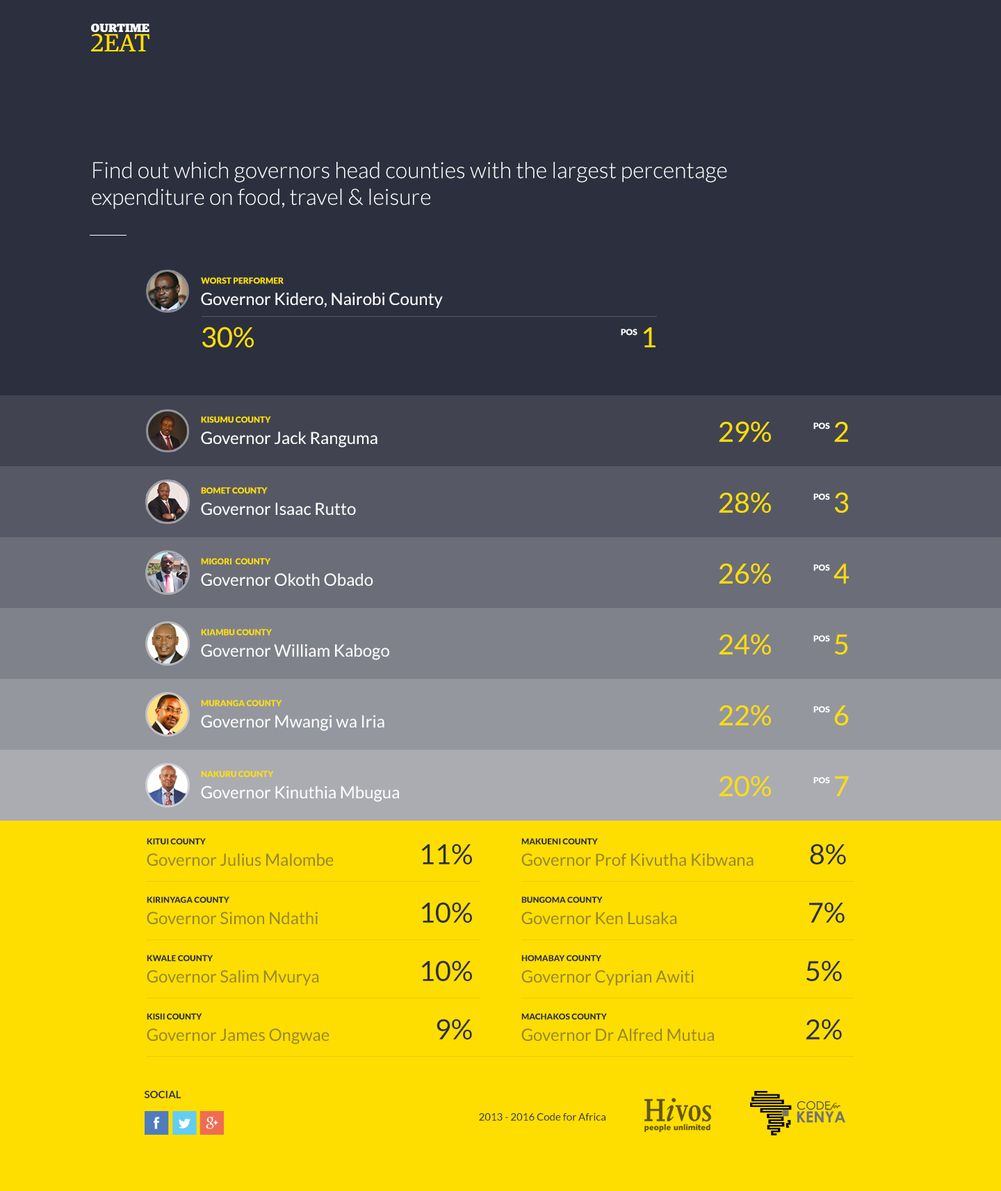
<style>
.page{position:relative;width:1001px;height:1191px;background:#2c2f3e}
.page>*{position:absolute;margin:0}
.t1{font:22.2px "Lato-Light";color:#fefefe}
.t2{font:8.3px "Lato-Black";color:#fede00}
.t3{font:16.7px "Lato-Regular";color:#fefefe}
.t4{font:27.8px "Lato-Regular";color:#fede00}
.t5{font:8.3px "Lato-Black";color:#ffffff}
.t6{font:8.3px "Lato-Black";color:#2c2f3e}
.t7{font:27.8px "Lato-Regular";color:#2c2f3e}
.t8{font:16.7px "Lato-Regular";color:#97862a}
.t9{font:10.4px "Lato-Bold";color:#2c2f3e}
.t10{font:10.4px "Lato-Regular";color:#2c2f3e}
</style>
<div class="page">
<p class="t1" style="left:92px;top:162px;width:635px;height:47px">Find out which governors head counties with the largest percentage <br>expenditure on food, travel &amp; leisure</p>
<p class="t2" style="left:201px;top:277px;width:83px;height:7px">WORST PERFORMER</p>
<p class="t3" style="left:201px;top:293px;width:242px;height:16px">Governor Kidero, Nairobi County</p>
<p class="t4" style="left:202px;top:327px;width:52px;height:21px">30%</p>
<p class="t5" style="left:621px;top:329px;width:16px;height:7px">POS</p>
<p class="t4" style="left:643px;top:327px;width:12px;height:21px">1</p>
<p class="t2" style="left:201px;top:416px;width:70px;height:7px">KISUMU COUNTY</p>
<p class="t4" style="left:719px;top:421px;width:52px;height:21px">29%</p>
<p class="t5" style="left:813px;top:423px;width:17px;height:7px">POS</p>
<p class="t4" style="left:834px;top:422px;width:14px;height:20px">2</p>
<p class="t3" style="left:201px;top:432px;width:176px;height:16px">Governor Jack Ranguma</p>
<p class="t2" style="left:201px;top:487px;width:67px;height:7px">BOMET COUNTY</p>
<p class="t4" style="left:719px;top:492px;width:52px;height:21px">28%</p>
<p class="t5" style="left:813px;top:494px;width:17px;height:6px">POS</p>
<p class="t4" style="left:835px;top:492px;width:14px;height:21px">3</p>
<p class="t3" style="left:201px;top:503px;width:155px;height:12px">Governor Isaac Rutto</p>
<p class="t2" style="left:201px;top:558px;width:70px;height:7px">MIGORI  COUNTY</p>
<p class="t4" style="left:719px;top:563px;width:52px;height:21px">26%</p>
<p class="t5" style="left:813px;top:564px;width:17px;height:7px">POS</p>
<p class="t4" style="left:833px;top:564px;width:16px;height:20px">4</p>
<p class="t3" style="left:201px;top:573px;width:172px;height:13px">Governor Okoth Obado</p>
<p class="t2" style="left:201px;top:629px;width:71px;height:7px">KIAMBU COUNTY</p>
<p class="t4" style="left:719px;top:634px;width:52px;height:21px">24%</p>
<p class="t5" style="left:813px;top:635px;width:17px;height:7px">POS</p>
<p class="t4" style="left:835px;top:635px;width:13px;height:20px">5</p>
<p class="t3" style="left:201px;top:644px;width:188px;height:16px">Governor William Kabogo</p>
<p class="t2" style="left:201px;top:700px;width:81px;height:7px">MURANGA COUNTY</p>
<p class="t4" style="left:719px;top:705px;width:52px;height:21px">22%</p>
<p class="t5" style="left:813px;top:706px;width:17px;height:7px">POS</p>
<p class="t4" style="left:835px;top:705px;width:14px;height:21px">6</p>
<p class="t3" style="left:201px;top:715px;width:183px;height:16px">Governor Mwangi wa Iria</p>
<p class="t2" style="left:201px;top:771px;width:73px;height:7px">NAKURU COUNTY</p>
<p class="t4" style="left:719px;top:776px;width:52px;height:21px">20%</p>
<p class="t5" style="left:813px;top:777px;width:17px;height:7px">POS</p>
<p class="t4" style="left:835px;top:776px;width:14px;height:21px">7</p>
<p class="t3" style="left:201px;top:786px;width:198px;height:16px">Governor Kinuthia Mbugua</p>
<p class="t6" style="left:147px;top:838px;width:59px;height:7px">KITUI COUNTY</p>
<p class="t7" style="left:421px;top:844px;width:51px;height:21px">11%</p>
<p class="t6" style="left:521px;top:838px;width:77px;height:7px">MAKUENI COUNTY</p>
<p class="t7" style="left:810px;top:844px;width:36px;height:21px">8%</p>
<p class="t8" style="left:147px;top:854px;width:187px;height:12px">Governor Julius Malombe</p>
<p class="t8" style="left:521px;top:854px;width:232px;height:12px">Governor Prof Kivutha Kibwana</p>
<p class="t6" style="left:147px;top:897px;width:82px;height:7px">KIRINYAGA COUNTY</p>
<p class="t7" style="left:421px;top:902px;width:51px;height:21px">10%</p>
<p class="t6" style="left:521px;top:897px;width:82px;height:7px">BUNGOMA COUNTY</p>
<p class="t7" style="left:809px;top:902px;width:36px;height:21px">7%</p>
<p class="t8" style="left:147px;top:912px;width:171px;height:12px">Governor Simon Ndathi</p>
<p class="t8" style="left:521px;top:912px;width:156px;height:12px">Governor Ken Lusaka</p>
<p class="t6" style="left:147px;top:955px;width:66px;height:7px">KWALE COUNTY</p>
<p class="t7" style="left:421px;top:961px;width:51px;height:20px">10%</p>
<p class="t6" style="left:521px;top:955px;width:81px;height:7px">HOMABAY COUNTY</p>
<p class="t7" style="left:806px;top:961px;width:36px;height:20px">5%</p>
<p class="t8" style="left:147px;top:970px;width:172px;height:16px">Governor Salim Mvurya</p>
<p class="t8" style="left:521px;top:970px;width:173px;height:16px">Governor Cyprian Awiti</p>
<p class="t6" style="left:147px;top:1013px;width:55px;height:7px">KISII COUNTY</p>
<p class="t6" style="left:521px;top:1013px;width:86px;height:7px">MACHAKOS COUNTY</p>
<p class="t7" style="left:437px;top:1019px;width:35px;height:21px">9%</p>
<p class="t7" style="left:806px;top:1019px;width:36px;height:21px">2%</p>
<p class="t8" style="left:147px;top:1029px;width:182px;height:16px">Governor James Ongwae</p>
<p class="t8" style="left:521px;top:1029px;width:193px;height:12px">Governor Dr Alfred Mutua</p>
<p class="t9" style="left:144px;top:1091px;width:37px;height:8px">SOCIAL</p>
<p class="t10" style="left:479px;top:1113px;width:126px;height:8px">2013 - 2016 Code for Africa</p>
</div>
